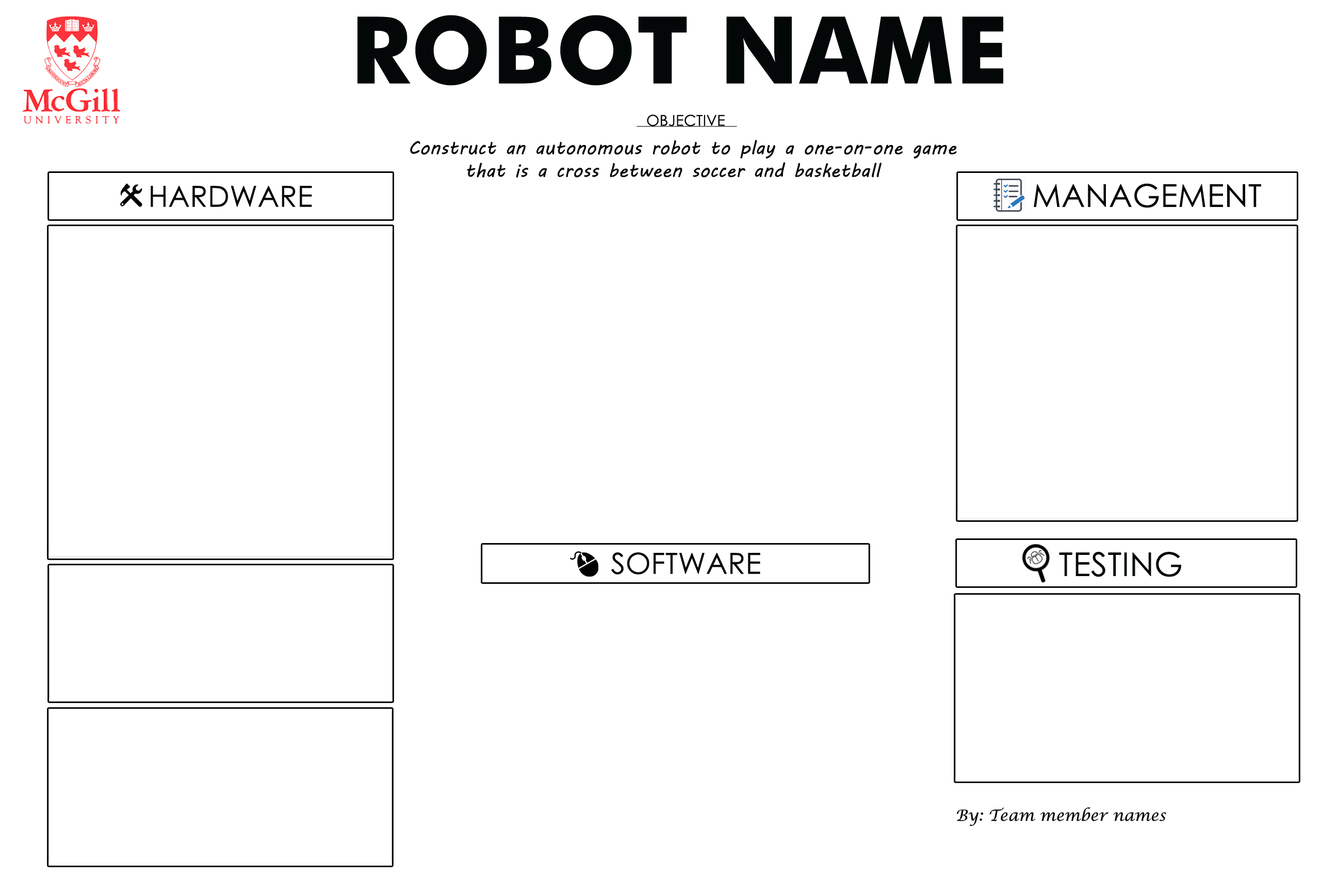
<style>
.page{position:relative;width:1337px;height:892px;background:#ffffff}
.page>*{position:absolute;margin:0}
.t1{font:93.3px "FuturaBT-Bold";letter-spacing:0.01em;color:#040707}
.t2{font:15px "CenturyGothic";letter-spacing:0.01em;color:#040707}
.t3{font:19px "MVBoli";letter-spacing:0.01em;color:#040707}
.t4{font:28.9px "CenturyGothic";letter-spacing:0.01em;color:#040707}
.t5{font:31.6px "CenturyGothic";letter-spacing:0.01em;color:#040707}
.t6{font:32.8px "CenturyGothic";letter-spacing:0.01em;color:#040707}
.t7{font:15.5px "LucidaCalligraphy-Italic";letter-spacing:0.01em;color:#040707}
</style>
<div class="page">
<p class="t1" style="left:358px;top:15px;width:646px;height:71px">ROBOT NAME</p>
<p class="t2" style="left:647px;top:115px;width:78px;height:11px">OBJECTIVE</p>
<p class="t3" style="left:410px;top:140px;width:547px;height:37px">Construct an autonomous robot to play a one-on-one game <br>  that is a cross between soccer and basketball</p>
<p class="t4" style="left:151px;top:186px;width:161px;height:21px">HARDWARE</p>
<p class="t5" style="left:1034px;top:183px;width:228px;height:25px">MANAGEMENT</p>
<p class="t4" style="left:611px;top:552px;width:150px;height:22px">SOFTWARE</p>
<p class="t6" style="left:1059px;top:552px;width:123px;height:25px">TESTING</p>
<p class="t7" style="left:957px;top:807px;width:210px;height:19px">By: Team member names</p>
</div>
